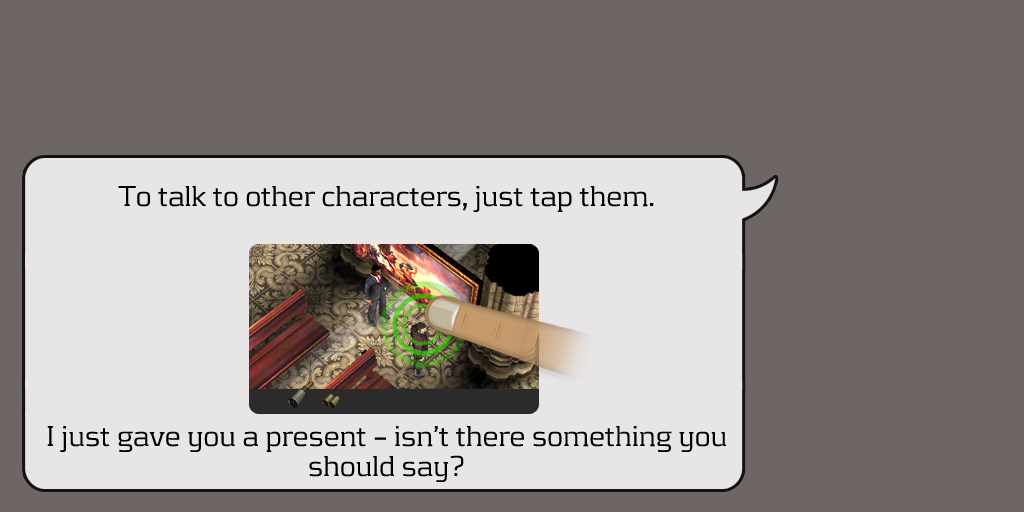
<style>
.page{position:relative;width:1024px;height:512px;background:#6e6665}
.page>*{position:absolute;margin:0}
.t1{font:30px/30px "KontrapunktLight";color:#000000}
</style>
<div class="page">
<p class="t1" style="left:47px;top:186px;width:679px;height:296px;text-align:center">To talk to other characters, just tap them. <br><br><br><br><br><br><br><br>I just gave you a present -- isn’t there something you should say?</p>
</div>
